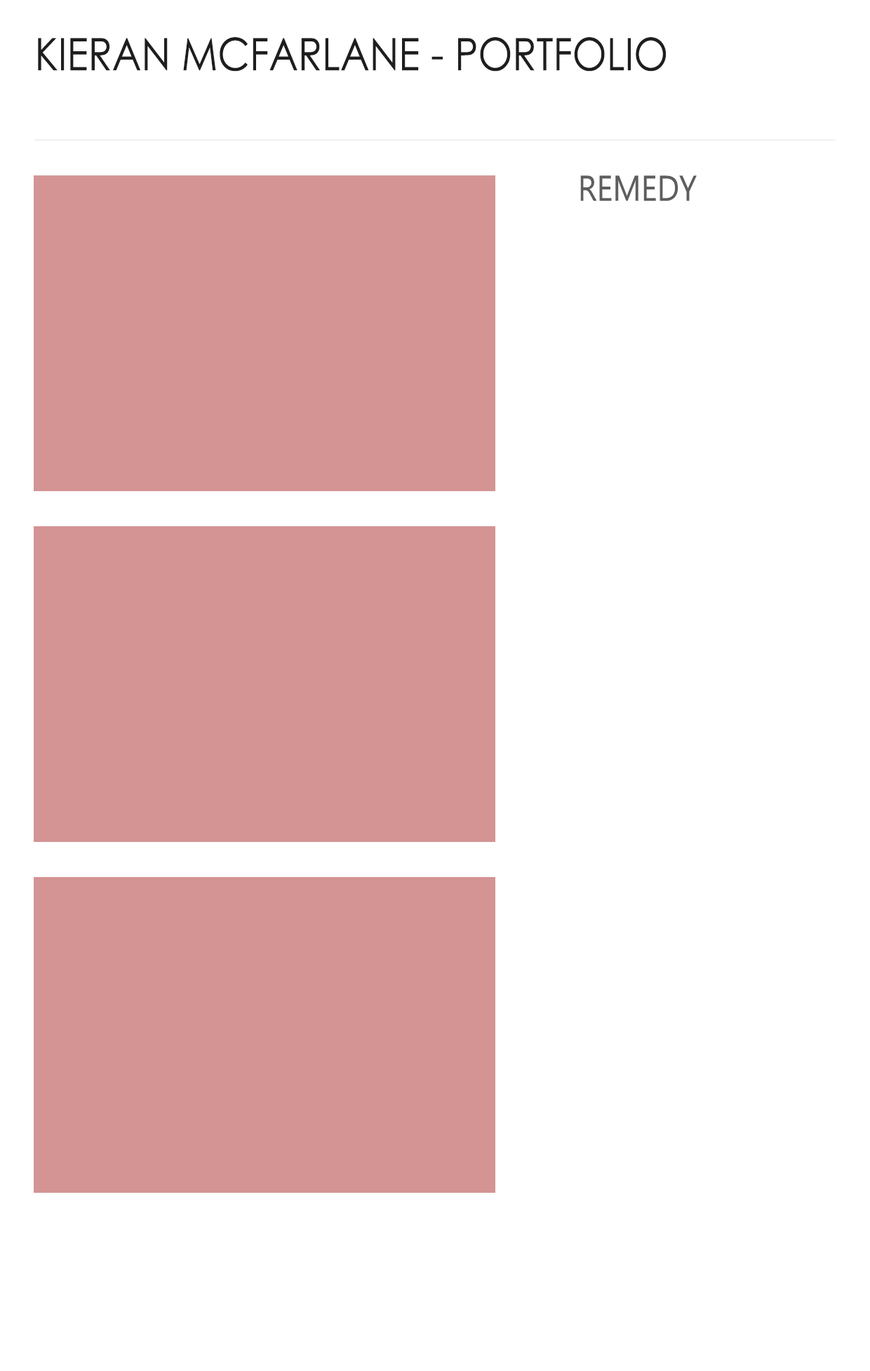
<style>
.page{position:relative;width:870px;height:1371px;background:#ffffff}
.page>*{position:absolute;margin:0}
.t1{font:44.7px "CenturyGothic";color:#1e1e1e;text-transform:uppercase;scale:0.88 1}
.t2{font:35.8px "Ebrima";color:#5e5e5e;text-transform:uppercase;scale:0.88 1}
</style>
<div class="page">
<p class="t1" style="left:38px;top:37px;width:628px;height:35px">KIERAN mCFARLANE - PORTFOLIO</p>
<p class="t2" style="left:580px;top:175px;width:117px;height:26px">Remedy</p>
</div>
